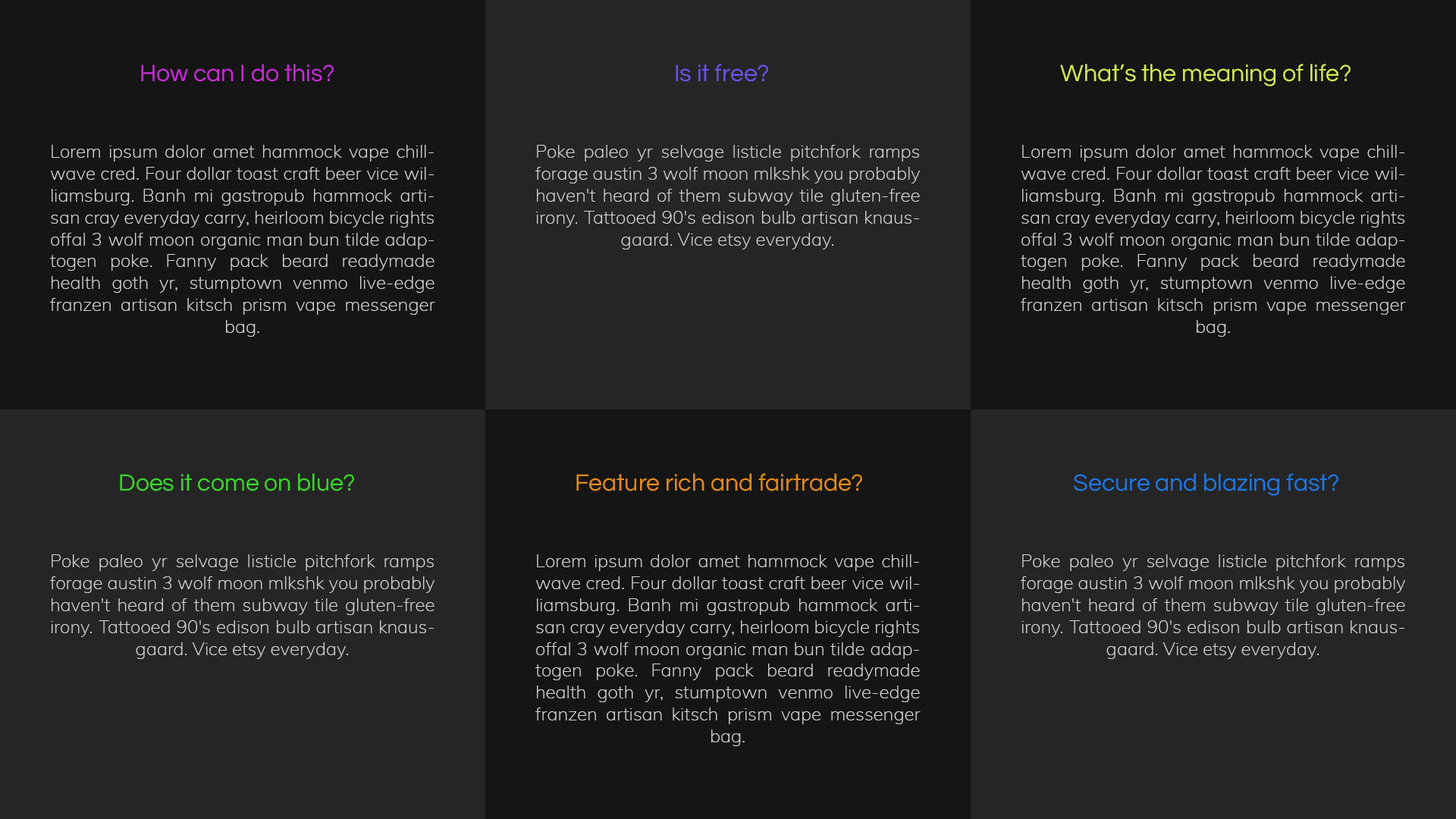
<style>
.page{position:relative;width:1456px;height:819px;background:#252525}
.page>*{position:absolute;margin:0}
.t1{font:24.3px "Questrial-Regular";color:#c62bd4}
.t2{font:24.3px "Questrial-Regular";color:#6754e6}
.t3{font:24.3px "Questrial-Regular";color:#d3e654}
.t4{font:18.2px "Muli-ExtraLight";color:#d4d4d4}
.t5{font:24.3px "Questrial-Regular";color:#39d42b}
.t6{font:24.3px "Questrial-Regular";color:#e1891e}
.t7{font:24.3px "Questrial-Regular";color:#1e76e1}
</style>
<div class="page">
<p class="t1" style="left:141px;top:64px;width:193px;height:18px">How can I do this?</p>
<p class="t2" style="left:676px;top:64px;width:92px;height:18px">Is it free?</p>
<p class="t3" style="left:1060px;top:64px;width:291px;height:22px">What’s the meaning of life?</p>
<p class="t4" style="left:50px;top:145px;width:385px;height:192px;text-align:justify">Lorem ipsum dolor amet hammock vape chillwave cred. Four dollar toast craft beer vice williamsburg. Banh mi gastropub hammock artisan cray everyday carry, heirloom bicycle rights offal 3 wolf moon organic man bun tilde adaptogen poke. Fanny pack beard readymade health goth yr, stumptown venmo live-edge franzen artisan kitsch prism vape messenger bag.</p>
<p class="t4" style="left:535px;top:145px;width:385px;height:104px;text-align:justify">Poke paleo yr selvage listicle pitchfork ramps forage austin 3 wolf moon mlkshk you probably haven't heard of them subway tile gluten-free irony. Tattooed 90's edison bulb artisan knausgaard. Vice etsy everyday.</p>
<p class="t4" style="left:1021px;top:145px;width:385px;height:192px;text-align:justify">Lorem ipsum dolor amet hammock vape chillwave cred. Four dollar toast craft beer vice williamsburg. Banh mi gastropub hammock artisan cray everyday carry, heirloom bicycle rights offal 3 wolf moon organic man bun tilde adaptogen poke. Fanny pack beard readymade health goth yr, stumptown venmo live-edge franzen artisan kitsch prism vape messenger bag.</p>
<p class="t5" style="left:120px;top:473px;width:234px;height:18px">Does it come on blue?</p>
<p class="t6" style="left:576px;top:473px;width:286px;height:18px">Feature rich and fairtrade?</p>
<p class="t7" style="left:1074px;top:473px;width:264px;height:23px">Secure and blazing fast?</p>
<p class="t4" style="left:50px;top:554px;width:385px;height:105px;text-align:justify">Poke paleo yr selvage listicle pitchfork ramps forage austin 3 wolf moon mlkshk you probably haven't heard of them subway tile gluten-free irony. Tattooed 90's edison bulb artisan knausgaard. Vice etsy everyday.</p>
<p class="t4" style="left:535px;top:554px;width:386px;height:192px;text-align:justify">Lorem ipsum dolor amet hammock vape chillwave cred. Four dollar toast craft beer vice williamsburg. Banh mi gastropub hammock artisan cray everyday carry, heirloom bicycle rights offal 3 wolf moon organic man bun tilde adaptogen poke. Fanny pack beard readymade health goth yr, stumptown venmo live-edge franzen artisan kitsch prism vape messenger bag.</p>
<p class="t4" style="left:1021px;top:554px;width:384px;height:105px;text-align:justify">Poke paleo yr selvage listicle pitchfork ramps forage austin 3 wolf moon mlkshk you probably haven't heard of them subway tile gluten-free irony. Tattooed 90's edison bulb artisan knausgaard. Vice etsy everyday.</p>
</div>
